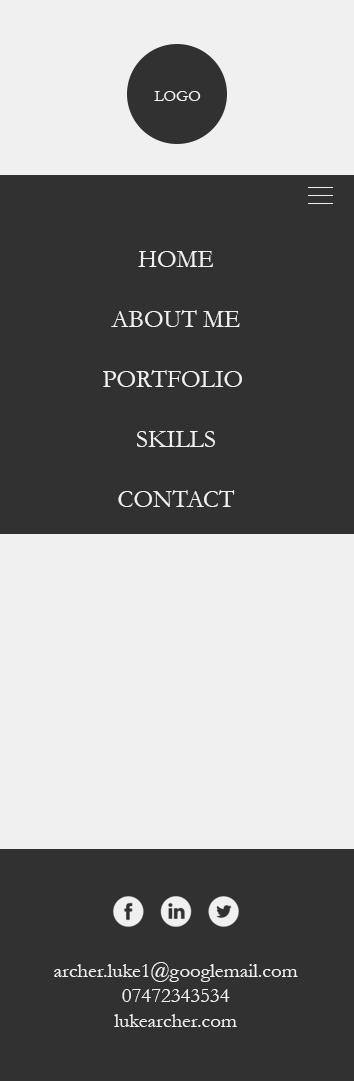
<style>
.page{position:relative;width:354px;height:1081px;background:#313131}
.page>*{position:absolute;margin:0}
.t1{font:25px "Garamond";color:#f0f0f0}
.t2{font:20.9px "Garamond";color:#f0f0f0}
</style>
<div class="page">
<p class="t1" style="left:103px;top:251px;width:139px;height:256px;text-align:center">HOME<br><br>ABOUT ME<br> <br>PORTFOLIO <br><br>SKILLS<br><br>CONTACT</p>
<p class="t2" style="left:54px;top:962px;width:244px;height:65px;text-align:center">archer.luke1@googlemail.com<br>07472343534<br>lukearcher.com</p>
</div>
